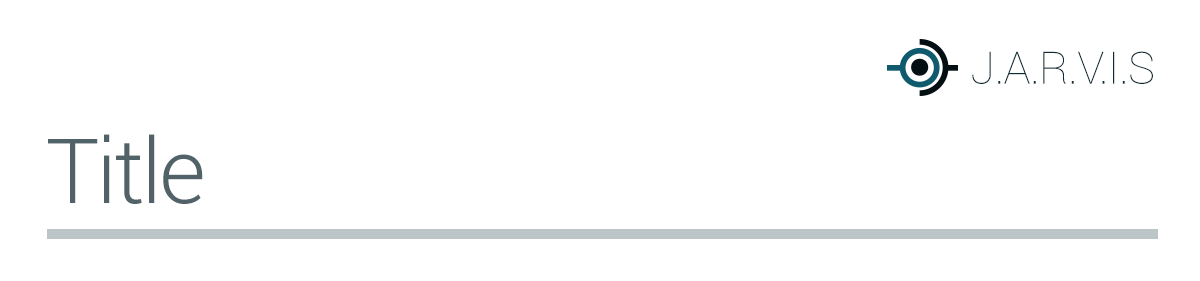
<style>
.page{position:relative;width:1200px;height:281px;background:#ffffff}
.page>*{position:absolute;margin:0}
.t1{font:44.8px "Roboto-Thin";letter-spacing:-0.013em;color:#0d2c35}
.t2{font:90px "Roboto-Light";letter-spacing:-0.03em;color:#516268}
</style>
<div class="page">
<p class="t1" style="left:972px;top:51px;width:181px;height:33px">J.A.R.V.I.S</p>
<p class="t2" style="left:48px;top:134px;width:155px;height:70px">Title</p>
</div>
